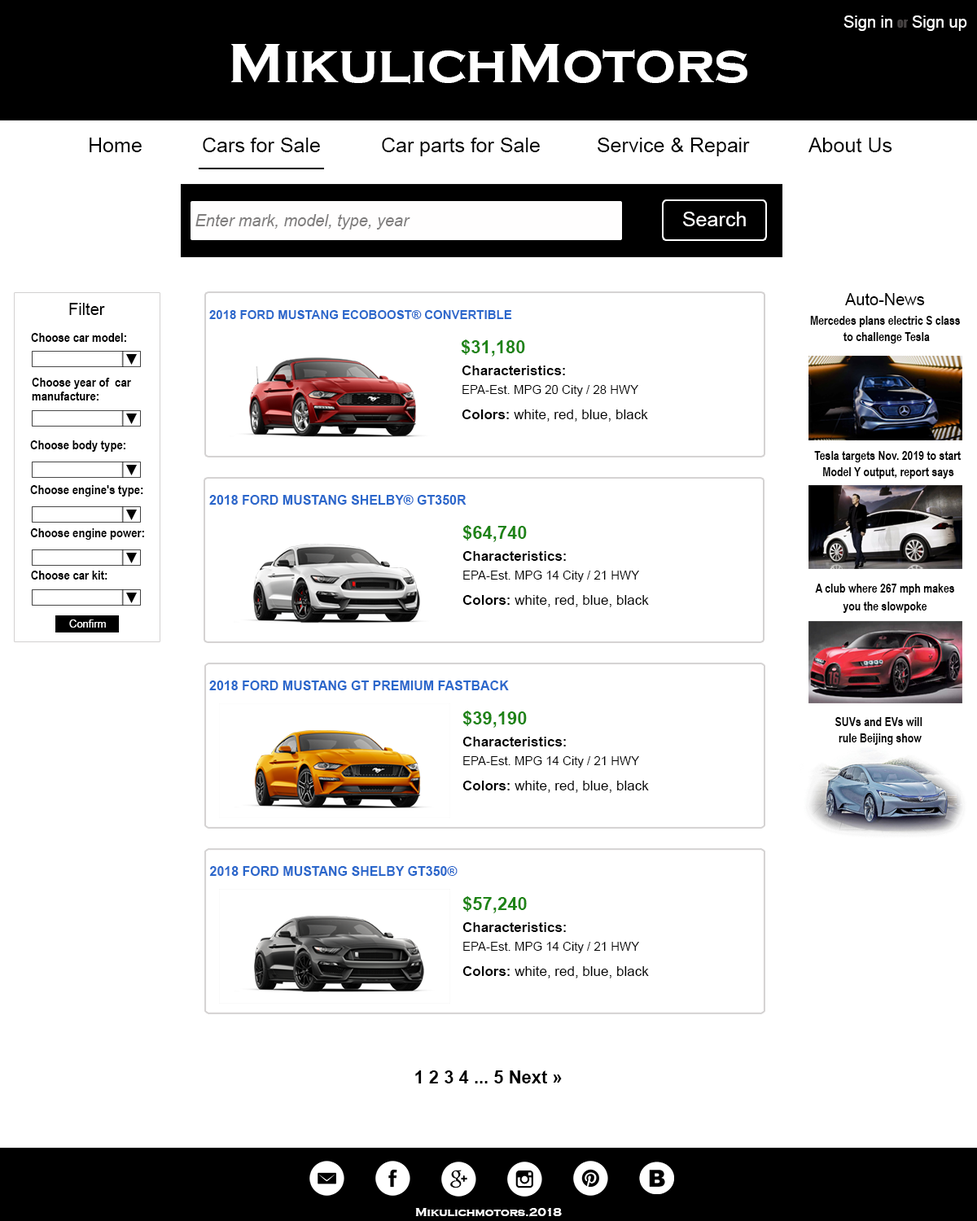
<style>
.page{position:relative;width:977px;height:1221px;background:#ffffff}
.page>*{position:absolute;margin:0}
.t1{font:16.3px "ArialMT";color:#ffffff}
.t2{font:12.2px "Impact";color:#464343}
.t3{font:57px "CopperplateGothic-Bold";color:#ffffff}
.t4{font:20.3px "ArialMT";color:#000000}
.t5{font:16.3px "Arial-ItalicMT";color:#807e7e}
.t6{font:20.3px "ArialMT";color:#fffefe}
.t7{font:16.3px "ArialMT";color:#000000}
.t8{font:12.2px "Arial-BoldMT";color:#2a67cb}
.t9{font:12.2px/16.3px "ArialNarrow-Bold";color:#000000}
.t10{font:13px "ArialNarrow-Bold";color:#000000}
.t11{font:17.9px "Arial-BoldMT";color:#1e8416}
.t12{font:13.8px "Arial-BoldMT";color:#000000}
.t13{font:12.2px "ArialMT";color:#000000}
.t14{font:13.8px "ArialMT";color:#000000}
.t15{font:12.2px "ArialNarrow-Bold";color:#000000}
.t16{font:13px "Arial-BoldMT";color:#2a67cb}
.t17{font:10.6px "ArialMT";color:#ffffff}
.t18{font:17.9px "Arial-BoldMT";color:#000000}
.t19{font:12.2px "CopperplateGothic-Bold";color:#ffffff}
</style>
<div class="page">
<p class="t1" style="left:843px;top:15px;width:49px;height:16px">Sign in</p>
<p class="t1" style="left:912px;top:15px;width:55px;height:16px">Sign up</p>
<p class="t2" style="left:897px;top:20px;width:11px;height:8px">or</p>
<p class="t3" style="left:231px;top:44px;width:516px;height:40px">MikulichMotors</p>
<p class="t4" style="left:90px;top:138px;width:52px;height:14px">Home</p>
<p class="t4" style="left:203px;top:138px;width:117px;height:14px">Cars for Sale</p>
<p class="t4" style="left:382px;top:138px;width:158px;height:18px">Car parts for Sale</p>
<p class="t4" style="left:597px;top:138px;width:153px;height:18px">Service &amp; Repair</p>
<p class="t4" style="left:808px;top:138px;width:84px;height:14px">About Us</p>
<p class="t5" style="left:195px;top:214px;width:215px;height:16px">Enter mark, model, type, year</p>
<p class="t6" style="left:683px;top:212px;width:63px;height:14px">Search</p>
<p class="t7" style="left:845px;top:293px;width:80px;height:12px">Auto-News</p>
<p class="t7" style="left:69px;top:303px;width:36px;height:12px">Filter</p>
<p class="t8" style="left:209px;top:310px;width:303px;height:9px">2018 FORD MUSTANG ECOBOOST® CONVERTIBLE</p>
<p class="t9" style="left:810px;top:316px;width:150px;height:27px;text-align:center">Mercedes plans electric S class <br>to challenge Tesla</p>
<p class="t10" style="left:31px;top:333px;width:95px;height:9px">Choose car model:</p>
<p class="t11" style="left:461px;top:339px;width:64px;height:17px">$31,180</p>
<p class="t12" style="left:461px;top:365px;width:104px;height:10px">Characteristics:</p>
<p class="t10" style="left:32px;top:378px;width:99px;height:11px">Choose year of  car</p>
<p class="t13" style="left:462px;top:385px;width:176px;height:11px">EPA-Est. MPG 20 City / 28 HWY</p>
<p class="t10" style="left:32px;top:391px;width:66px;height:9px">manufacture:</p>
<p class="t14" style="left:461px;top:409px;width:187px;height:13px"><span class="t12">Colors:</span> white, red, blue, black</p>
<p class="t10" style="left:30px;top:440px;width:95px;height:12px">Choose body type:</p>
<p class="t15" style="left:814px;top:451px;width:146px;height:11px">Tesla targets Nov. 2019 to start</p>
<p class="t15" style="left:823px;top:467px;width:131px;height:12px">Model Y output, report says</p>
<p class="t10" style="left:30px;top:485px;width:113px;height:11px">Choose engine's type:</p>
<p class="t16" style="left:209px;top:495px;width:257px;height:10px">2018 FORD MUSTANG SHELBY® GT350R</p>
<p class="t10" style="left:30px;top:528px;width:114px;height:12px">Choose engine power:</p>
<p class="t11" style="left:462px;top:525px;width:65px;height:17px">$64,740</p>
<p class="t12" style="left:462px;top:551px;width:104px;height:10px">Characteristics:</p>
<p class="t10" style="left:31px;top:571px;width:76px;height:9px">Choose car kit:</p>
<p class="t13" style="left:463px;top:571px;width:176px;height:11px">EPA-Est. MPG 14 City / 21 HWY</p>
<p class="t15" style="left:815px;top:584px;width:139px;height:11px">A club where 267 mph makes</p>
<p class="t14" style="left:462px;top:595px;width:187px;height:12px"><span class="t12">Colors:</span> white, red, blue, black</p>
<p class="t15" style="left:842px;top:601px;width:85px;height:12px">you the slowpoke</p>
<p class="t17" style="left:69px;top:619px;width:37px;height:9px">Confirm</p>
<p class="t16" style="left:209px;top:680px;width:300px;height:10px">2018 FORD MUSTANG GT PREMIUM FASTBACK</p>
<p class="t11" style="left:462px;top:711px;width:65px;height:17px">$39,190</p>
<p class="t9" style="left:835px;top:717px;width:87px;height:28px;text-align:center">SUVs and EVs will <br>rule Beijing show</p>
<p class="t12" style="left:462px;top:737px;width:104px;height:9px">Characteristics:</p>
<p class="t13" style="left:463px;top:756px;width:176px;height:12px">EPA-Est. MPG 14 City / 21 HWY</p>
<p class="t14" style="left:462px;top:781px;width:187px;height:12px"><span class="t12">Colors:</span> white, red, blue, black</p>
<p class="t16" style="left:209px;top:866px;width:248px;height:10px">2018 FORD MUSTANG SHELBY GT350®</p>
<p class="t11" style="left:462px;top:896px;width:65px;height:17px">$57,240</p>
<p class="t12" style="left:462px;top:922px;width:104px;height:10px">Characteristics:</p>
<p class="t13" style="left:463px;top:942px;width:176px;height:11px">EPA-Est. MPG 14 City / 21 HWY</p>
<p class="t14" style="left:462px;top:966px;width:187px;height:12px"><span class="t12">Colors:</span> white, red, blue, black</p>
<p class="t18" style="left:415px;top:1070px;width:147px;height:13px">1 2 3 4 ... 5 Next »</p>
<p class="t19" style="left:415px;top:1208px;width:147px;height:9px">Mikulichmotors.2018</p>
</div>
